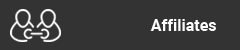
<style>
.page{position:relative;width:240px;height:50px;background:#333333}
.page>*{position:absolute;margin:0}
.t1{font:16px "Roboto-Bold";color:#ffffff}
</style>
<div class="page">
<p class="t1" style="left:150px;top:19px;width:66px;height:12px">Affiliates</p>
</div>
